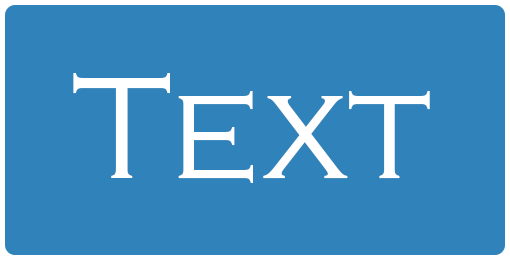
<style>
.page{position:relative;width:510px;height:260px;background:#2f82ba}
.page>*{position:absolute;margin:0}
.t1{font:150px "CopperplateGothic-Light";color:#ffffff}
</style>
<div class="page">
<p class="t1" style="left:73px;top:73px;width:357px;height:110px">Text</p>
</div>
